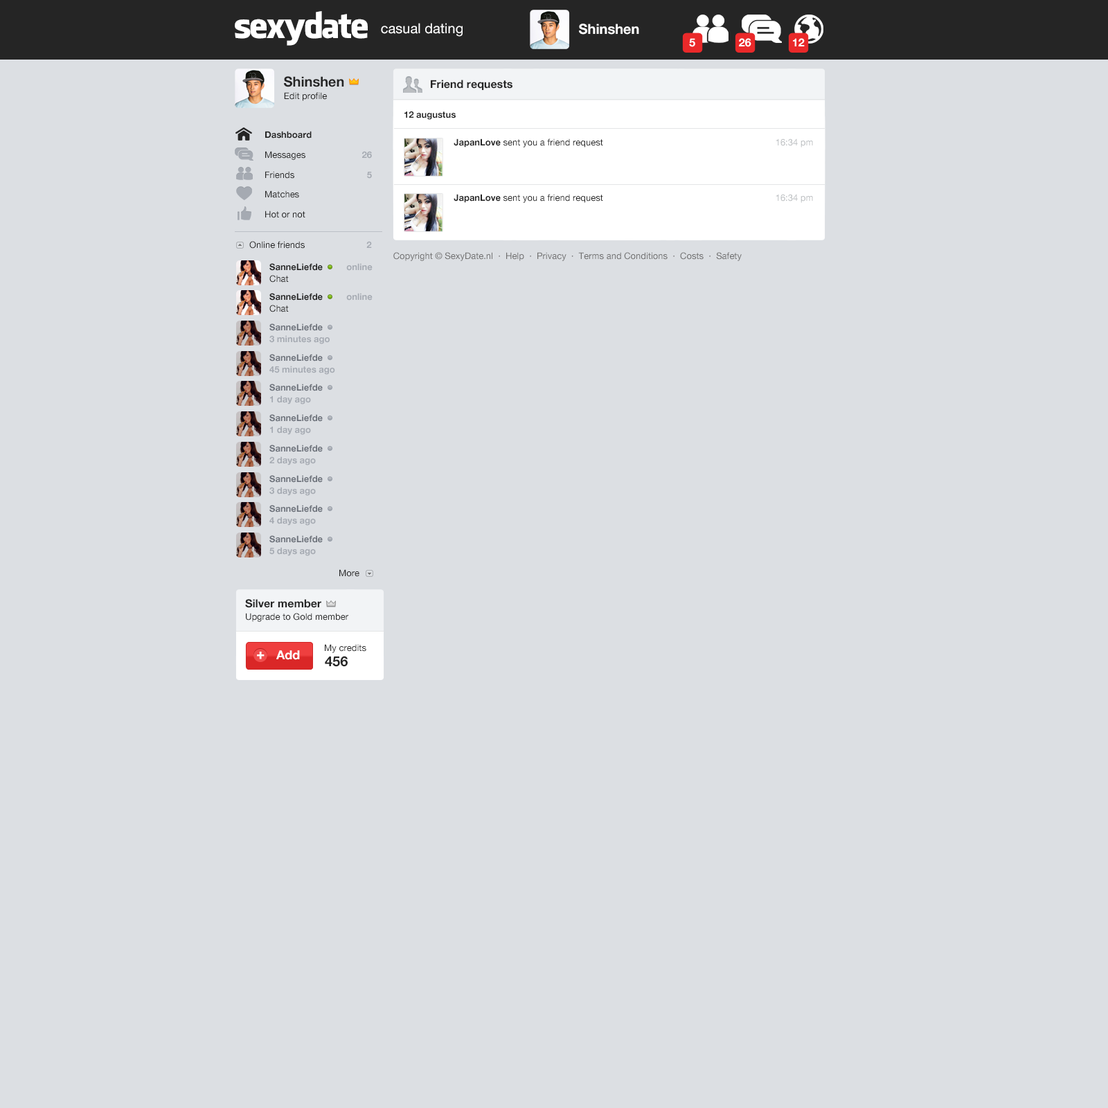
<style>
.page{position:relative;width:1108px;height:1108px;background:#dcdfe3}
.page>*{position:absolute;margin:0}
.t1{font:34.6px "FacebookLetterFaces";letter-spacing:-0.05em;color:#ffffff}
.t2{font:13.8px "HelveticaNeue";color:#ffffff}
.t3{font:13.8px "HelveticaNeue-Bold";color:#ffffff}
.t4{font:11.1px "HelveticaNeue-Bold";color:#ffffff}
.t5{font:13.8px "HelveticaNeue-Bold";color:#252525}
.t6{font:11.1px "HelveticaNeue-Bold";color:#252525}
.t7{font:9px "HelveticaNeue";color:#252525}
.t8{font:9px/13.8px "HelveticaNeue-Bold";color:#252525}
.t9{font:9px/13.8px "HelveticaNeue";color:#252525}
.t10{font:9px/13.8px "HelveticaNeue";color:#bbbec1}
.t11{font:9px/20px "HelveticaNeue";color:#252525}
.t12{font:9px/20px "HelveticaNeue-Bold";color:#252525}
.t13{font:9px/20px "HelveticaNeue-Bold";color:#a5aab2}
.t14{font:9px "HelveticaNeue-Bold";color:#a5aab2}
.t15{font:9px "HelveticaNeue";color:#707070}
.t16{font:9px/11.8px "HelveticaNeue-Bold";color:#252525}
.t17{font:9px/11.8px "HelveticaNeue-Bold";color:#a5aab2}
.t18{font:9px/11.8px "HelveticaNeue";color:#252525}
.t19{font:9px/11.8px "HelveticaNeue-Bold";color:#6d727b}
.t20{font:13.2px "HelveticaNeue-Bold";color:#ffffff;font-weight:bold}
.t21{font:12.5px "HelveticaNeue-Bold";color:#ffffff}
</style>
<div class="page">
<p class="t1" style="left:235px;top:11px;width:133px;height:35px">sexydate</p>
<p class="t2" style="left:381px;top:23px;width:81px;height:14px">casual dating</p>
<p class="t3" style="left:579px;top:24px;width:60px;height:11px">Shinshen</p>
<p class="t4" style="left:689px;top:38px;width:6px;height:9px">5</p>
<p class="t4" style="left:739px;top:38px;width:12px;height:9px">26</p>
<p class="t4" style="left:793px;top:38px;width:11px;height:8px">12</p>
<p class="t5" style="left:284px;top:76px;width:60px;height:11px">Shinshen</p>
<p class="t6" style="left:431px;top:80px;width:81px;height:10px">Friend requests</p>
<p class="t7" style="left:284px;top:92px;width:43px;height:9px">Edit profile</p>
<p class="t8" style="left:404px;top:111px;width:409px;height:92px">12 augustus<br><br>                    JapanLove<span class="t9"> sent you a friend request                         </span><span class="t10">16:34 pm<br><br><br><br> </span>                   JapanLove<span class="t9"> sent you a friend request                         </span><span class="t10">16:34 pm</span></p>
<p class="t11" style="left:265px;top:131px;width:47px;height:87px"><span class="t12">Dashboard<br></span>Messages<br>Friends<br>Matches<br>Hot or not</p>
<p class="t13" style="left:362px;top:151px;width:10px;height:28px;text-align:right">26<br>5</p>
<p class="t7" style="left:249px;top:241px;width:123px;height:8px">Online friends      <span class="t14">2</span></p>
<p class="t15" style="left:393px;top:252px;width:348px;height:9px">Copyright © SexyDate.nl  ·  Help  ·  Privacy  ·  Terms and Conditions  ·  Costs  ·  Safety</p>
<p class="t16" style="left:269px;top:263px;width:103px;height:19px">SanneLiefde          <span class="t17">online<br></span><span class="t18">Chat</span></p>
<p class="t16" style="left:269px;top:293px;width:103px;height:19px">SanneLiefde          <span class="t17">online<br></span><span class="t18">Chat</span></p>
<p class="t17" style="left:269px;top:323px;width:61px;height:21px"><span class="t19">SanneLiefde<br></span>3 minutes ago</p>
<p class="t17" style="left:269px;top:354px;width:66px;height:21px"><span class="t19">SanneLiefde<br></span>45 minutes ago</p>
<p class="t19" style="left:269px;top:384px;width:54px;height:20px">SanneLiefde<br><span class="t17">1 day ago</span></p>
<p class="t19" style="left:269px;top:414px;width:54px;height:21px">SanneLiefde<br><span class="t17">1 day ago</span></p>
<p class="t19" style="left:269px;top:444px;width:54px;height:21px">SanneLiefde<br><span class="t17">2 days ago</span></p>
<p class="t19" style="left:269px;top:475px;width:54px;height:21px">SanneLiefde<br><span class="t17">3 days ago</span></p>
<p class="t19" style="left:269px;top:505px;width:54px;height:20px">SanneLiefde<br><span class="t17">4 days ago</span></p>
<p class="t19" style="left:269px;top:535px;width:54px;height:21px">SanneLiefde<br><span class="t17">5 days ago</span></p>
<p class="t7" style="left:339px;top:569px;width:20px;height:8px">More</p>
<p class="t6" style="left:245px;top:599px;width:76px;height:9px">Silver member</p>
<p class="t7" style="left:246px;top:613px;width:102px;height:9px">Upgrade to Gold member</p>
<p class="t20" style="left:257px;top:651px;width:7px;height:8px">+</p>
<p class="t21" style="left:276px;top:650px;width:24px;height:10px">Add</p>
<p class="t7" style="left:325px;top:644px;width:41px;height:9px">My credits</p>
<p class="t5" style="left:325px;top:656px;width:23px;height:11px">456</p>
</div>
